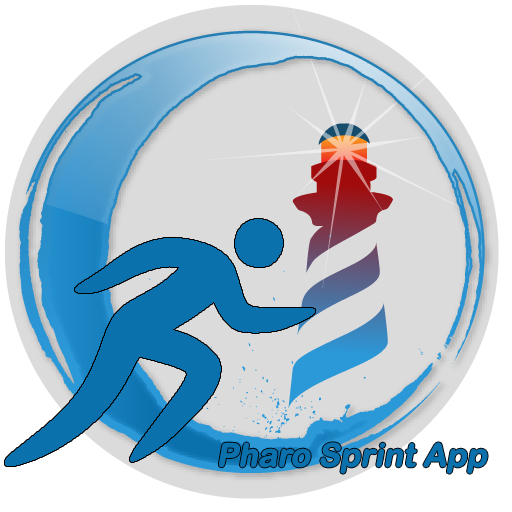
<style>
.page{position:relative;width:512px;height:512px;background:#dbdbdb}
.page>*{position:absolute;margin:0}
.t1{font:32px "ArialRoundedMTBold";letter-spacing:-0.02em;color:#0b71ad;font-weight:bold;font-style:italic}
</style>
<div class="page">
<p class="t1" style="left:219px;top:442px;width:269px;height:32px">Pharo Sprint App</p>
</div>
